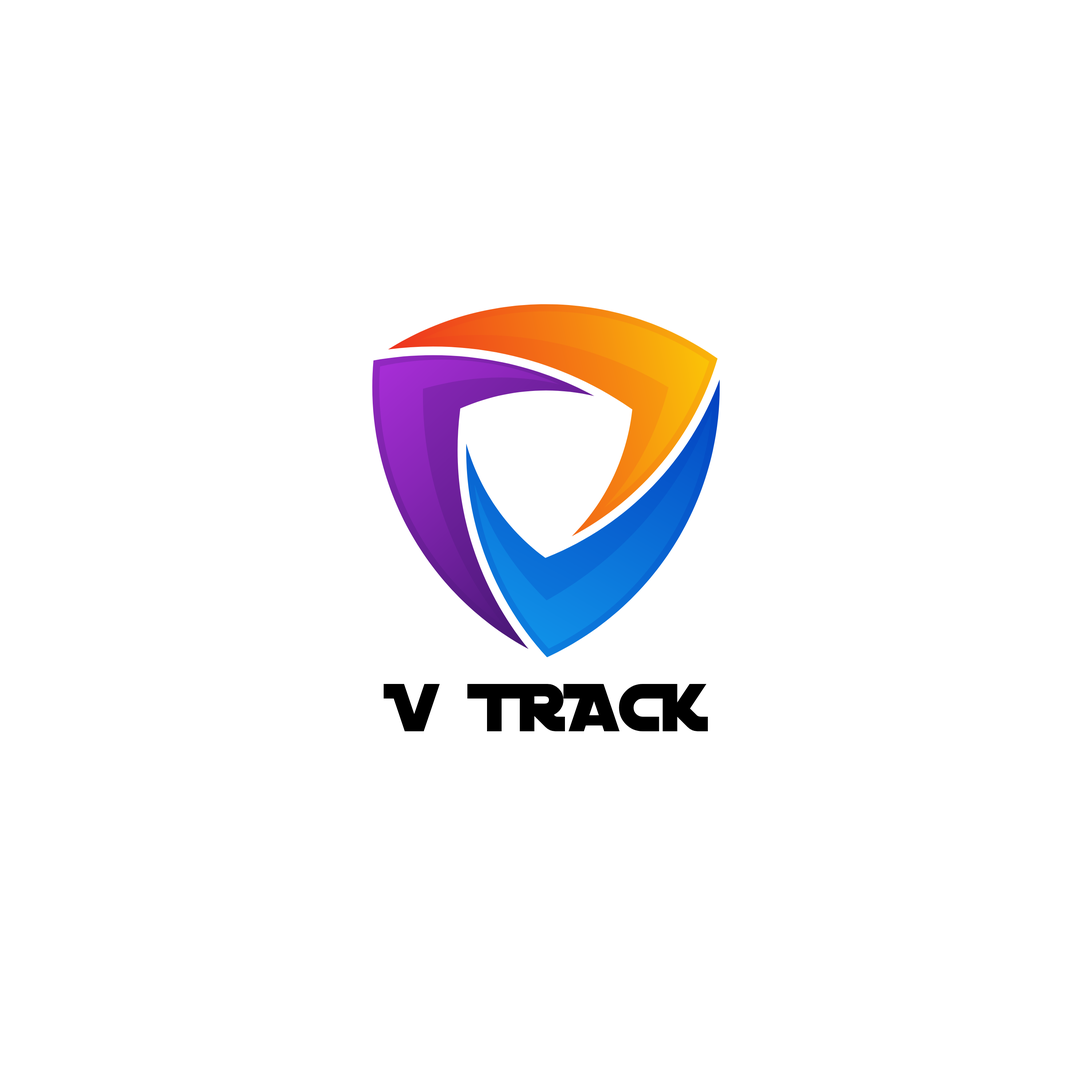
<style>
.page{position:relative;width:1092px;height:1092px;background:#ffffff}
.page>*{position:absolute;margin:0}
.t1{font:72.8px "DistantGalaxy";color:#000000}
</style>
<div class="page">
<p class="t1" style="left:384px;top:684px;width:324px;height:47px">V TRACK</p>
</div>
